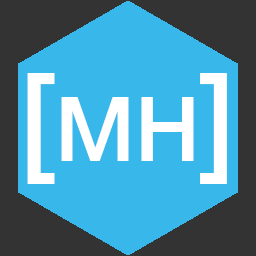
<style>
.page{position:relative;width:256px;height:256px;background:#38b7ea}
.page>*{position:absolute;margin:0}
.t1{font:90px "HelveticaNeue-Medium";color:#ffffff}
.t2{font:120px "HelveticaNeue-Medium";color:#ffffff}
</style>
<div class="page">
<p class="t1" style="left:27px;top:73px;width:200px;height:111px"><span class="t2">[</span>MH<span class="t2">]</span></p>
</div>
